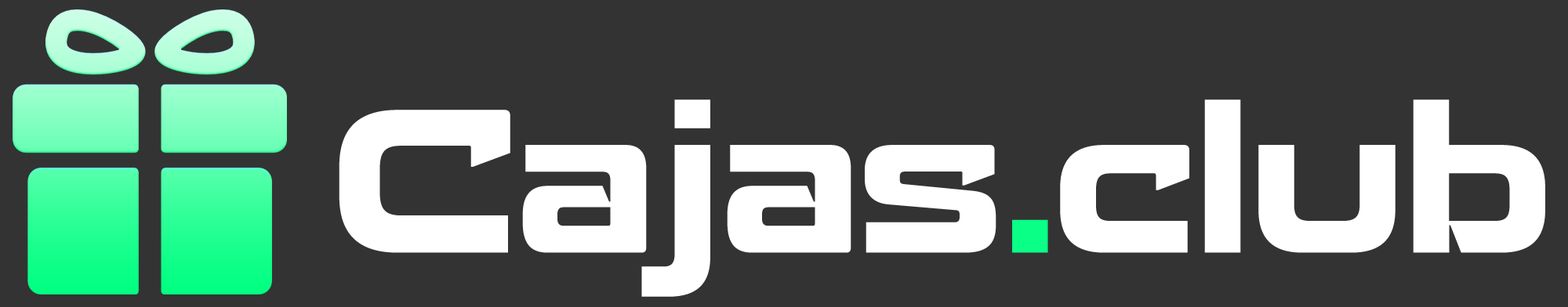
<style>
.page{position:relative;width:1568px;height:307px;background:#333333}
.page>*{position:absolute;margin:0}
.t1{font:196px "Recharge-Bold";color:#ffffff}
.t2{font:196px "Recharge-Bold";color:#0aff86}
</style>
<div class="page">
<p class="t1" style="left:339px;top:100px;width:1206px;height:197px">Cajas<span class="t2">.</span>club</p>
</div>
